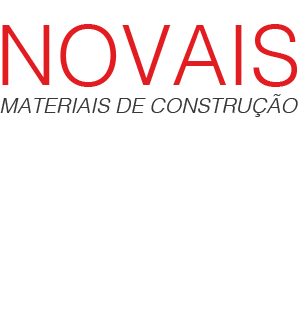
<style>
.page{position:relative;width:300px;height:309px;background:#ffffff}
.page>*{position:absolute;margin:0}
.t1{font:83.2px "Helvetica-Light";color:#e21d22}
.t2{font:21.3px "Helvetica-LightOblique";color:#383838}
</style>
<div class="page">
<p class="t1" style="left:2px;top:24px;width:295px;height:63px">NOVAIS</p>
<p class="t2" style="left:0px;top:94px;width:298px;height:23px">MATERIAIS DE CONSTRUÇÃO</p>
</div>
